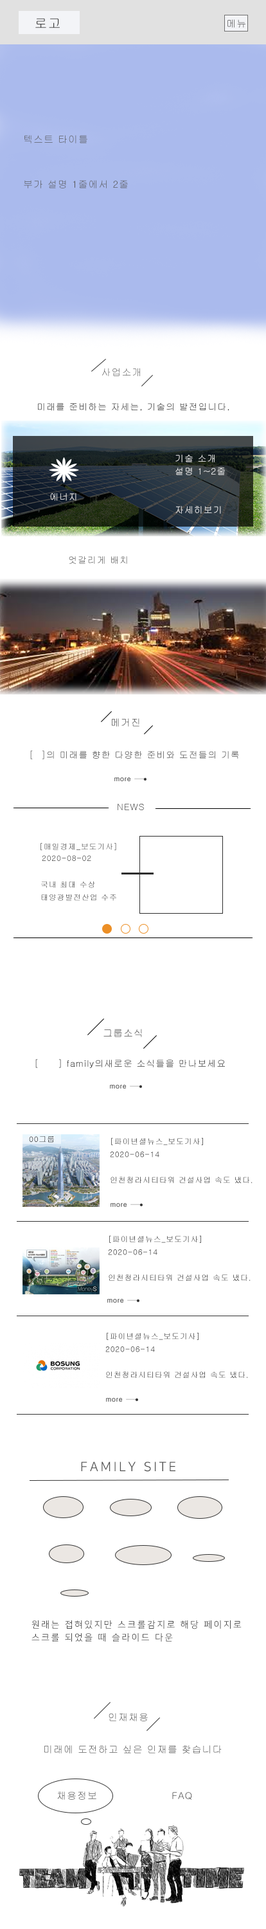
<style>
.page{position:relative;width:266px;height:1929px;background:#ffffff}
.page>*{position:absolute;margin:0}
.t1{font:12.9px "Gulim";letter-spacing:0.065em;color:#3d3d3d}
.t2{font:9.6px "Gulim";letter-spacing:0.065em}
.t3{font:9.6px/45px "Gulim";letter-spacing:0.065em;color:#595959}
.t4{font:9px "Gulim";letter-spacing:0.065em;color:#060606}
.t5{font:9px/12.9px "Gulim";letter-spacing:0.065em;color:#ffffff}
.t6{font:9px "Gulim";letter-spacing:0.065em}
.t7{font:9px "Gulim";letter-spacing:0.065em;color:#484848}
.t8{font:9px "Gulim";letter-spacing:0.065em;color:#2d2d2d}
.t9{font:7.7px "Gulim";letter-spacing:0.065em}
.t10{font:7.7px/12.9px "Gulim";letter-spacing:0.065em}
.t11{font:12.9px "NanumSquareR";letter-spacing:0.18em;color:#4b4b4b}
.t12{font:9px/12.9px "NanumSquareR";letter-spacing:0.18em;color:#4b4b4b}
.t13{font:9.6px "Gulim";letter-spacing:0.065em;color:#474747}
</style>
<div class="page">
<p class="t1" style="left:35px;top:18px;width:25px;height:10px">로고</p>
<p class="t2" style="left:228px;top:19px;width:18px;height:9px">메뉴</p>
<p class="t3" style="left:24px;top:135px;width:104px;height:53px">텍스트 타이틀<br>부가 설명 1줄에서 2줄</p>
<p class="t2" style="left:102px;top:368px;width:38px;height:8px">사업소개</p>
<p class="t4" style="left:38px;top:402px;width:192px;height:9px">미래를 준비하는 자세는, 기술의 발전입니다.</p>
<p class="t5" style="left:176px;top:455px;width:49px;height:59px">기술 소개<br>설명 1~2줄<br><br><br>자세히보기</p>
<p class="t6" style="left:50px;top:493px;width:26px;height:8px">에너지</p>
<p class="t7" style="left:69px;top:556px;width:58px;height:8px">엇갈리게 배치</p>
<p class="t2" style="left:112px;top:718px;width:28px;height:8px">메거진</p>
<p class="t6" style="left:30px;top:750px;width:209px;height:9px">[  ]의 미래를 향한 다양한 준비와 도전들의 기록</p>
<p class="t8" style="left:118px;top:804px;width:26px;height:6px">NEWS</p>
<p class="t9" style="left:40px;top:843px;width:76px;height:8px">[매일경제_보도기사]</p>
<p class="t9" style="left:42px;top:855px;width:49px;height:6px">2020-08-02</p>
<p class="t10" style="left:41px;top:881px;width:75px;height:20px">국내 최대 수상<br>태양광발전산업 수주</p>
<p class="t2" style="left:104px;top:1029px;width:38px;height:8px">그룹소식</p>
<p class="t4" style="left:35px;top:1059px;width:190px;height:9px">[ ] family의새로운 소식들을 만나보세요</p>
<p class="t9" style="left:29px;top:1136px;width:25px;height:6px">00그룹</p>
<p class="t10" style="left:110px;top:1137px;width:143px;height:46px">[파이년셜뉴스_보도기사]<br>2020-06-14<br><br>인천청라시티타워 건설사업 속도 냈다.</p>
<p class="t10" style="left:108px;top:1235px;width:143px;height:46px">[파이년셜뉴스_보도기사]<br>2020-06-14<br><br>인천청라시티타워 건설사업 속도 냈다.</p>
<p class="t10" style="left:105px;top:1332px;width:143px;height:46px">[파이년셜뉴스_보도기사]<br>2020-06-14<br><br>인천청라시티타워 건설사업 속도 냈다.</p>
<p class="t11" style="left:81px;top:1461px;width:95px;height:11px">FAMILY SITE</p>
<p class="t12" style="left:32px;top:1620px;width:210px;height:21px">원래는 접혀있지만 스크롤감지로 해당 페이지로<br>스크롤 되었을 때 슬라이드 다운</p>
<p class="t2" style="left:109px;top:1713px;width:39px;height:8px">인재채용</p>
<p class="t13" style="left:44px;top:1745px;width:178px;height:8px">미래에 도전하고 싶은 인재를 찾습니다</p>
<p class="t13" style="left:57px;top:1791px;width:39px;height:8px">채용정보</p>
<p class="t13" style="left:172px;top:1792px;width:20px;height:7px">FAQ</p>
</div>
